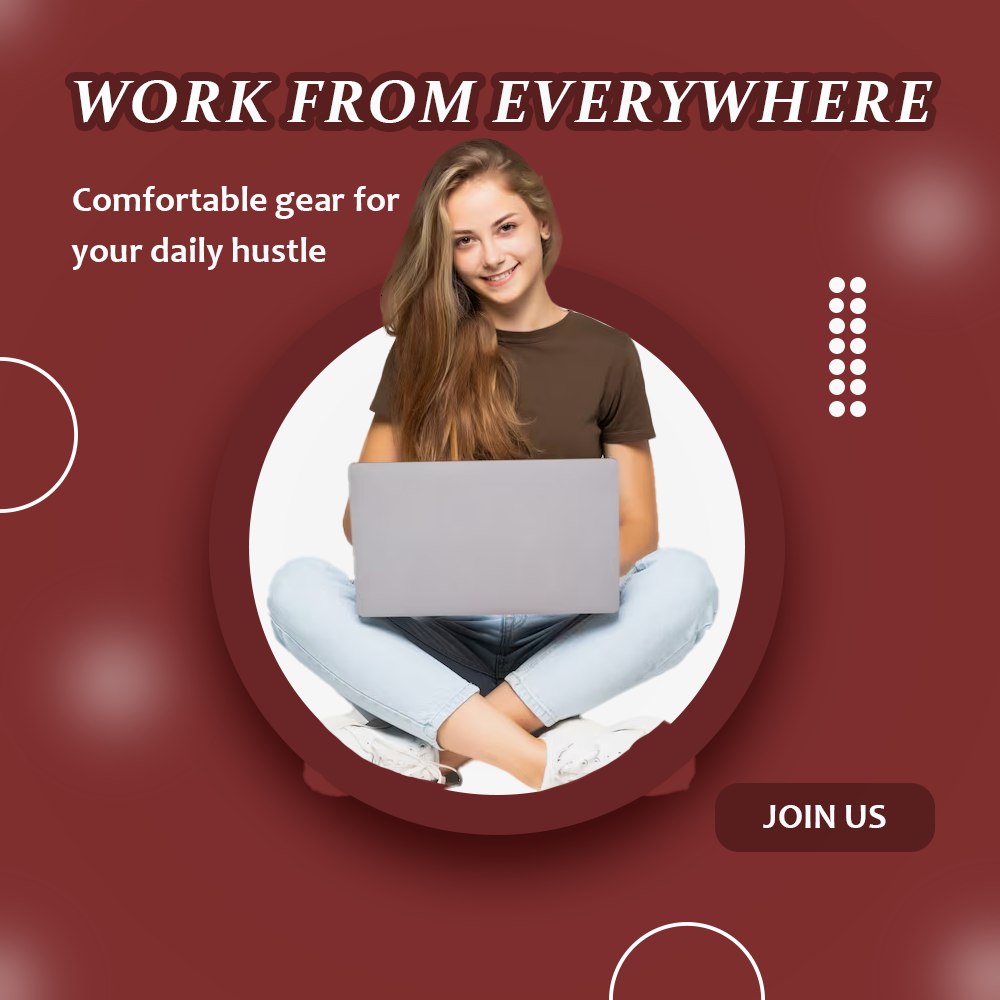
<style>
.page{position:relative;width:1000px;height:1000px}
.page>*{position:absolute;margin:0}
.t1{font:60px "Constantia-BoldItalic";color:#ffffff;text-transform:uppercase}
.t2{font:36px "Candara-Bold";color:#ffffff}
</style>
<div class="page">
<p class="t1" style="left:73px;top:80px;width:860px;height:43px">WORK FROM EVERYWHERE</p>
<p class="t2" style="left:73px;top:186px;width:327px;height:33px">Comfortable gear for</p>
<p class="t2" style="left:71px;top:237px;width:255px;height:33px">your daily hustle</p>
<p class="t2" style="left:763px;top:805px;width:123px;height:23px">JOIN US</p>
</div>
